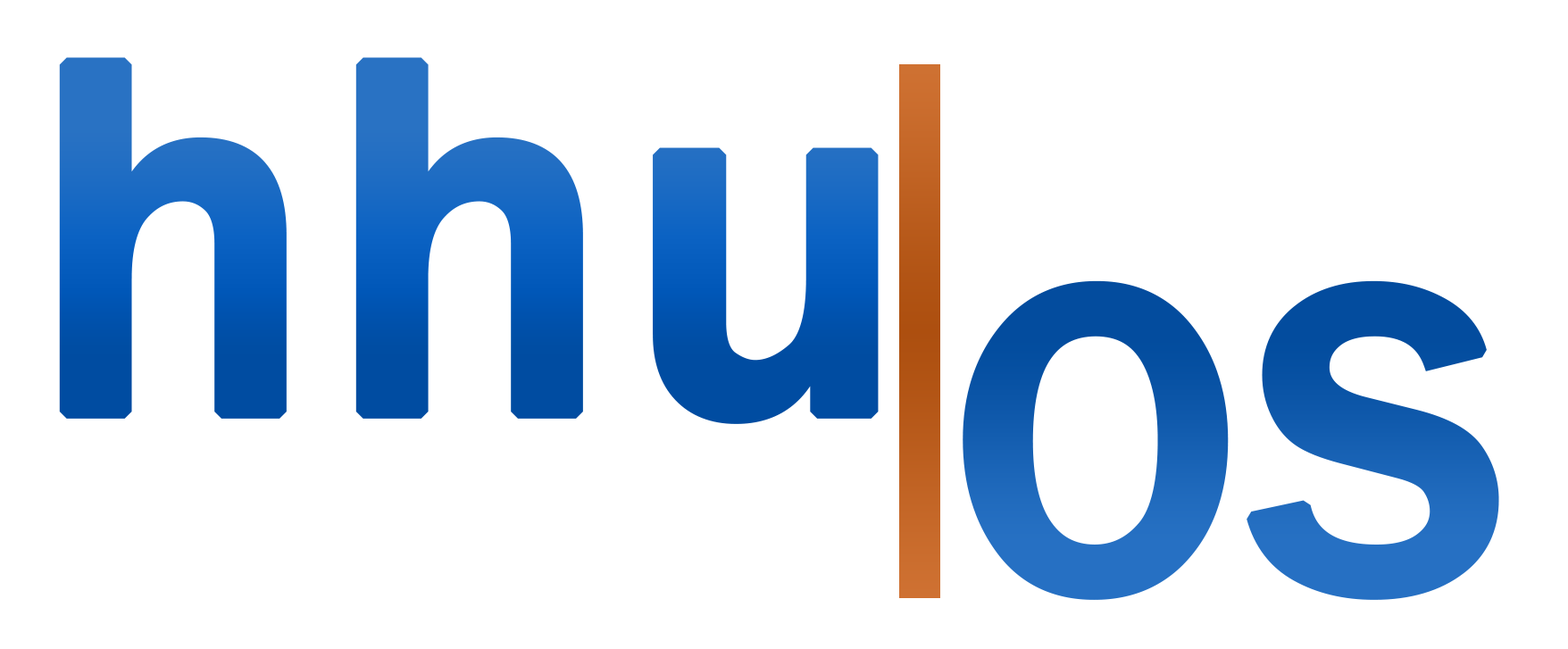
<style>
.page{position:relative;width:1568px;height:649px;background:#ffffff}
.page>*{position:absolute;margin:0}
.t1{font:520.9px "FranklinGothic-Medium";color:#0057b8;font-weight:bold}
.t2{font:446.5px "FranklinGothic-Medium";color:#155fb1;font-weight:bold}
</style>
<div class="page">
<p class="t1" style="left:59px;top:57px;width:820px;height:367px">hhu</p>
<p class="t2" style="left:963px;top:280px;width:536px;height:320px">OS</p>
</div>
